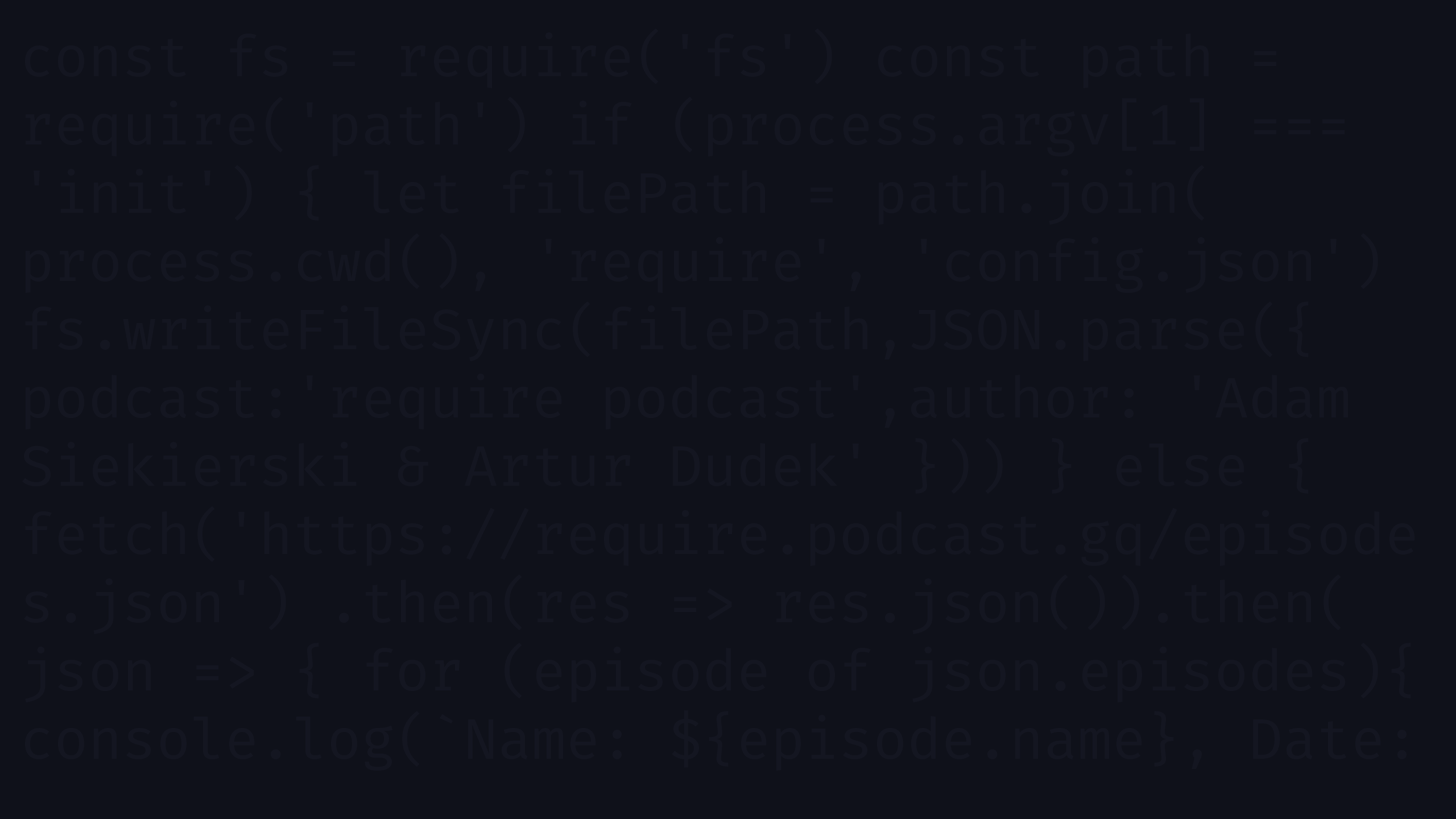
<style>
.page{position:relative;width:1456px;height:819px;background:#0f111a}
.page>*{position:absolute;margin:0}
.t1{font:56.9px "FiraCode-Regular";color:#141621}
</style>
<div class="page">
<p class="t1" style="left:22px;top:28px;width:1393px;height:743px">const fs = require('fs') const path = require('path') if (process.argv[1] === 'init') { let filePath = path.join( process.cwd(), 'require', 'config.json')<br>fs.writeFileSync(filePath,JSON.parse({ podcast:'require podcast',author: 'Adam Siekierski &amp; Artur Dudek' })) } else { fetch('https://require.podcast.gq/episodes.json') .then(res =&gt; res.json()).then( json =&gt; { for (episode of json.episodes){   console.log(`Name: ${episode.name}, Date: ${episode.date}, Guests: ${episode.guests.join(' ')}`)<br>    }<br>  })<br>}</p>
</div>
